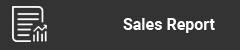
<style>
.page{position:relative;width:240px;height:50px;background:#333333}
.page>*{position:absolute;margin:0}
.t1{font:16px "Roboto-Bold";color:#ffffff}
</style>
<div class="page">
<p class="t1" style="left:123px;top:18px;width:92px;height:15px">Sales Report</p>
</div>
